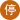
<style>
.page{position:relative;width:20px;height:20px;background:#c66209}
.page>*{position:absolute;margin:0}
.t1{font:12px "SimHei";color:#ffffff}
</style>
<div class="page">
<p class="t1" style="left:4px;top:4px;width:12px;height:12px">停</p>
</div>
